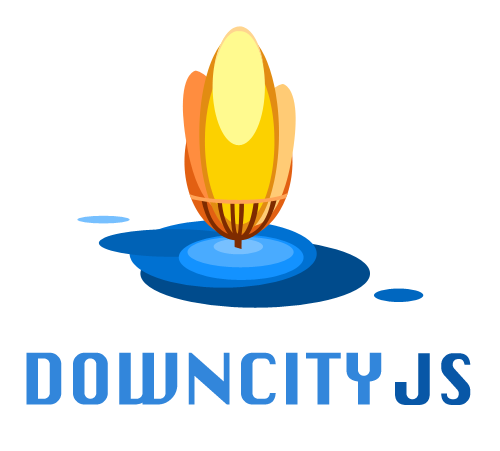
<style>
.page{position:relative;width:500px;height:451px;background:#ffffff}
.page>*{position:absolute;margin:0}
.t1{font:69.1px "Krungthep";color:#3286db}
.t2{font:69.1px "Krungthep";letter-spacing:-0.1em;color:#3286db}
.t3{font:69.1px "Krungthep";letter-spacing:-0.05em;color:#3286db}
.t4{font:69.1px "Krungthep";color:#0857a7}
</style>
<div class="page">
<p class="t1" style="left:26px;top:352px;width:356px;height:53px">DOWN<span class="t2">C</span><span class="t3">I</span>TY</p>
<p class="t4" style="left:395px;top:353px;width:76px;height:52px">JS</p>
</div>
